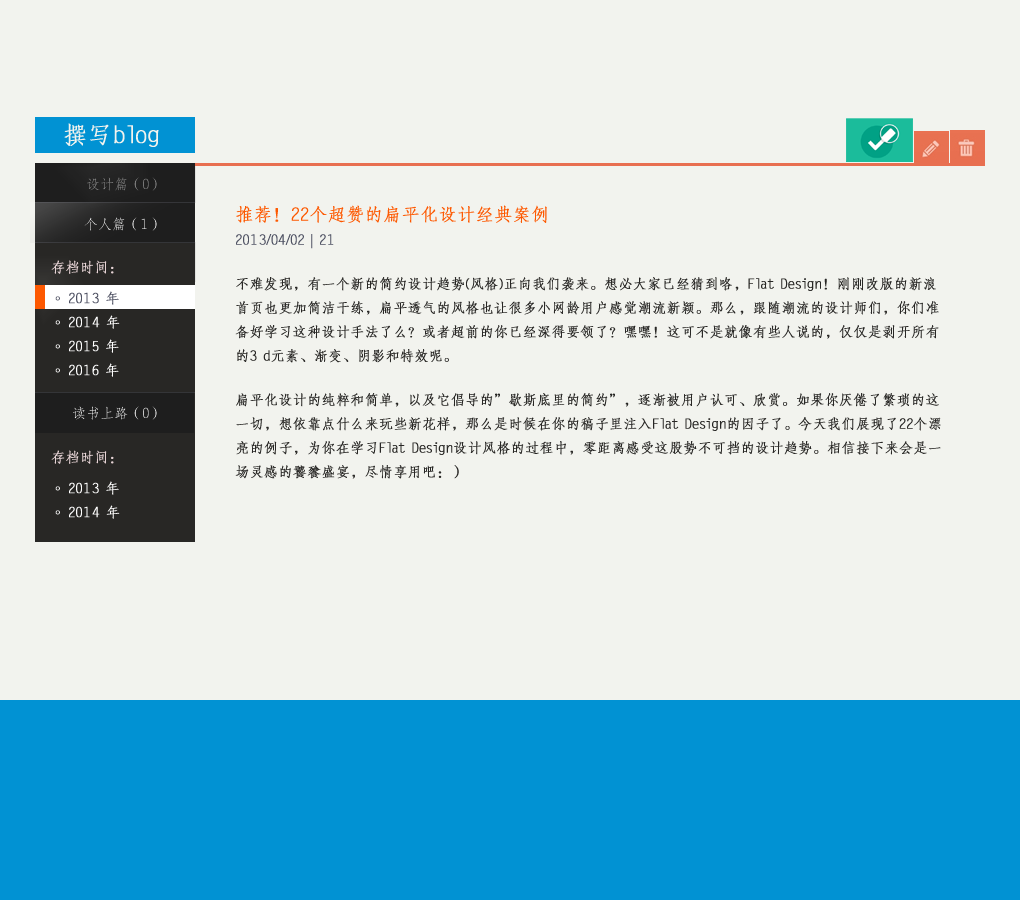
<style>
.page{position:relative;width:1020px;height:900px;background:#f2f3ee}
.page>*{position:absolute;margin:0}
.t1{font:24px "FZFSJW--GB1-0";color:#f2f3ee;font-weight:bold}
.t2{font:14px "FZFSJW--GB1-0"}
.t3{font:14px/24px "FZFSJW--GB1-0";color:#282725;font-weight:bold}
.t4{font:18px/24px "FZFSJW--GB1-0";color:#fd5800;font-weight:bold}
.t5{font:14px/24px "FZFSJW--GB1-0";color:#4f5263;font-weight:bold}
.t6{font:14px "FZFSJW--GB1-0";color:#e7d4d6;font-weight:bold}
.t7{font:14px/24px "FZFSJW--GB1-0";color:#ffffff;font-weight:bold}
.t8{font:14px "FZFSJW--GB1-0";color:#ffffff}
</style>
<div class="page">
<p class="t1" style="left:64px;top:123px;width:95px;height:24px">撰写blog</p>
<p class="t2" style="left:87px;top:177px;width:70px;height:14px">设计篇（0）</p>
<p class="t3" style="left:235px;top:205px;width:706px;height:274px"><span class="t4">推荐！22个超赞的扁平化设计经典案例<br></span><span class="t5">2013/04/02｜21<br><br></span>不难发现，有一个新的简约设计趋势(风格)正向我们袭来。想必大家已经猜到咯，Flat Design！刚刚改版的新浪首页也更加简洁干练，扁平透气的风格也让很多小网龄用户感觉潮流新颖。那么，跟随潮流的设计师们，你们准备好学习这种设计手法了么？或者超前的你已经深得要领了？嘿嘿！这可不是就像有些人说的，仅仅是剥开所有的3 d元素、渐变、阴影和特效呢。<br><br>扁平化设计的纯粹和简单，以及它倡导的”歇斯底里的简约”，逐渐被用户认可、欣赏。如果你厌倦了繁琐的这一切，想依靠点什么来玩些新花样，那么是时候在你的稿子里注入Flat Design的因子了。今天我们展现了22个漂亮的例子，为你在学习Flat Design设计风格的过程中，零距离感受这股势不可挡的设计趋势。相信接下来会是一场灵感的饕餮盛宴，尽情享用吧：）</p>
<p class="t2" style="left:84px;top:217px;width:73px;height:14px">个人篇（1）</p>
<p class="t6" style="left:51px;top:260px;width:63px;height:14px">存档时间：</p>
<p class="t7" style="left:69px;top:291px;width:51px;height:86px"><span class="t5">2013 年<br></span>2014 年<br>2015 年<br>2016 年</p>
<p class="t7" style="left:55px;top:296px;width:5px;height:77px"><span class="t5">。<br></span>。<br>。<br>。</p>
<p class="t8" style="left:73px;top:406px;width:84px;height:14px">读书上路（0）</p>
<p class="t6" style="left:51px;top:450px;width:63px;height:14px">存档时间：</p>
<p class="t7" style="left:55px;top:486px;width:5px;height:29px">。<br>。</p>
<p class="t7" style="left:69px;top:481px;width:51px;height:38px">2013 年<br>2014 年</p>
</div>
